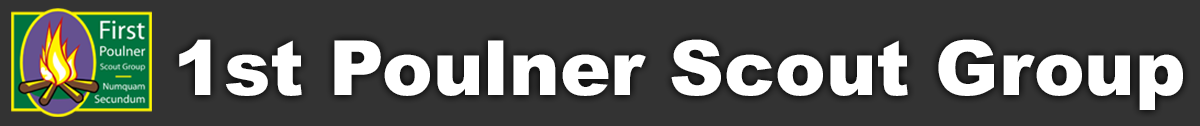
<style>
.page{position:relative;width:1200px;height:126px;background:#333333}
.page>*{position:absolute;margin:0}
.t1{font:76.1px "Arial-Black";color:#ffffff}
</style>
<div class="page">
<p class="t1" style="left:179px;top:39px;width:1004px;height:71px">1st Poulner Scout Group</p>
</div>
